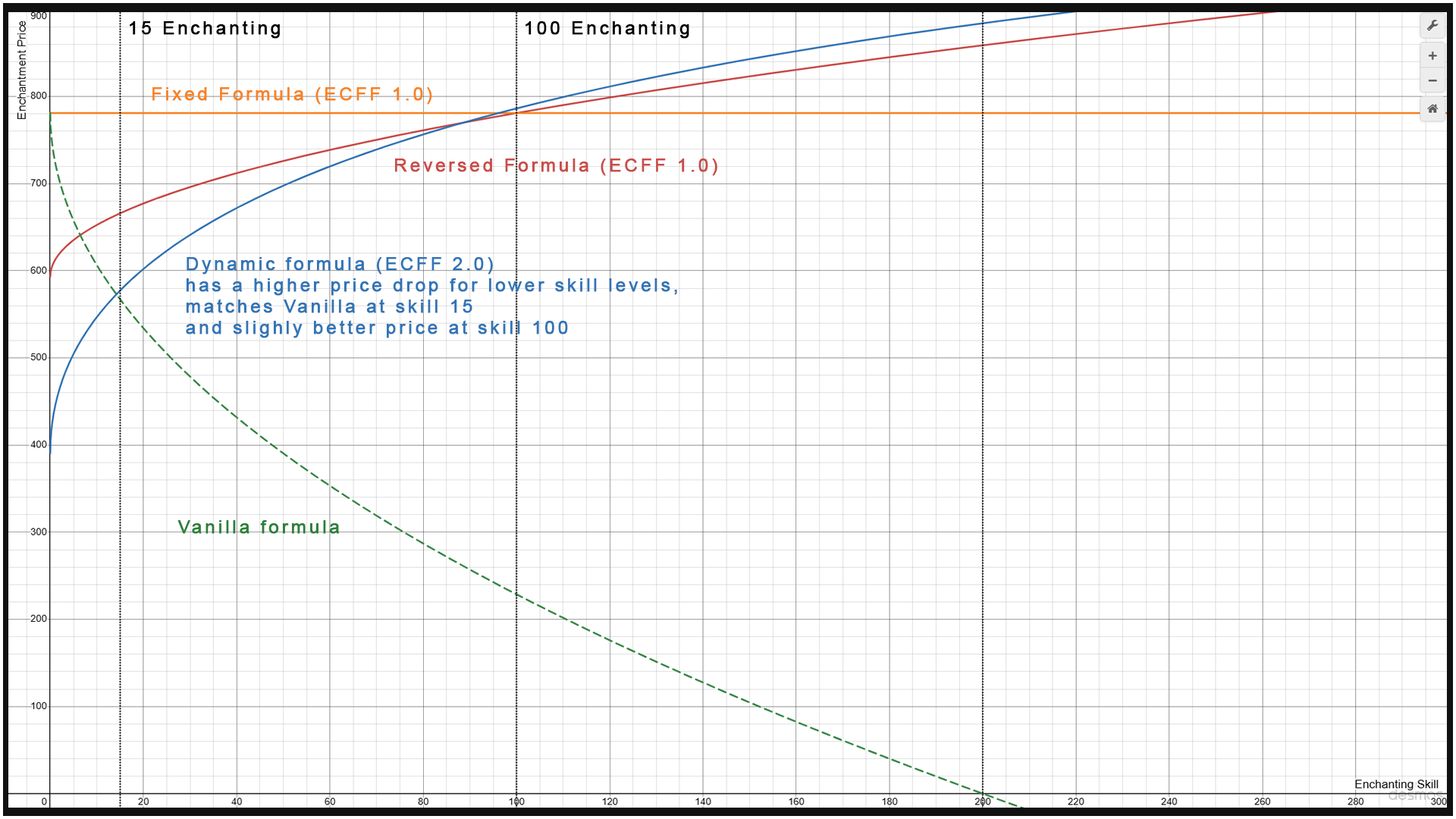
<style>
.page{position:relative;width:1456px;height:819px;background:#ffffff}
.page>*{position:absolute;margin:0}
.t1{font:18.2px "ArialMT";letter-spacing:0.14em;color:#000000;font-weight:bold}
.t2{font:18.2px "ArialMT";letter-spacing:0.14em;color:#f98120;font-weight:bold}
.t3{font:18.2px "ArialMT";letter-spacing:0.14em;color:#c94c48;font-weight:bold}
.t4{font:18.2px/21.2px "ArialMT";letter-spacing:0.14em;color:#3174b6;font-weight:bold}
.t5{font:18.2px "ArialMT";letter-spacing:0.14em;color:#2a7f38;font-weight:bold}
</style>
<div class="page">
<p class="t1" style="left:130px;top:20px;width:150px;height:19px">15 Enchanting</p>
<p class="t1" style="left:526px;top:20px;width:163px;height:19px">100 Enchanting</p>
<p class="t2" style="left:152px;top:87px;width:280px;height:18px">Fixed Formula (ECFF 1.0)</p>
<p class="t3" style="left:395px;top:158px;width:322px;height:18px">Reversed Formula (ECFF 1.0)</p>
<p class="t4" style="left:186px;top:257px;width:491px;height:81px">Dynamic formula (ECFF 2.0)<br>has a higher price drop for lower skill levels, <br>matches Vanilla at skill 15 <br>and slighly better price at skill 100</p>
<p class="t5" style="left:177px;top:520px;width:162px;height:14px">Vanilla formula</p>
</div>
